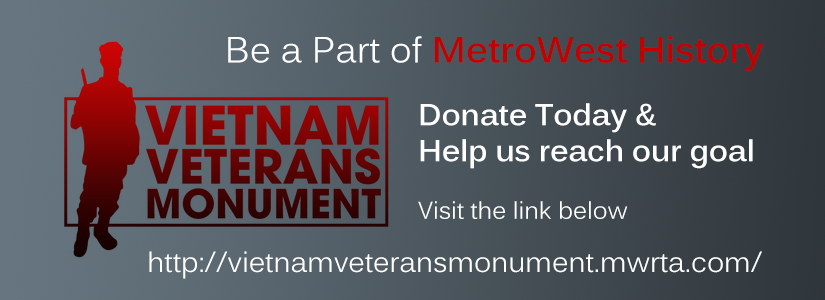
<style>
.page{position:relative;width:825px;height:300px}
.page>*{position:absolute;margin:0}
.t1{font:36px "Kalinga-Bold";color:#c20000}
.t2{font:36px "Kalinga";color:#ffffff}
.t3{font:30px "Kalinga-Bold";color:#ffffff}
.t4{font:24px "Kalinga";color:#ffffff}
.t5{font:28px "Kalinga";color:#ffffff}
</style>
<div class="page">
<p class="t1" style="left:228px;top:36px;width:535px;height:35px"><span class="t2">Be a Part of </span>MetroWest History</p>
<p class="t3" style="left:418px;top:103px;width:335px;height:116px">Donate Today &amp;<br>Help us reach our goal<br><span class="t4"><br>Visit the link below</span></p>
<p class="t5" style="left:149px;top:251px;width:613px;height:28px">http://vietnamveteransmonument.mwrta.com/</p>
</div>
